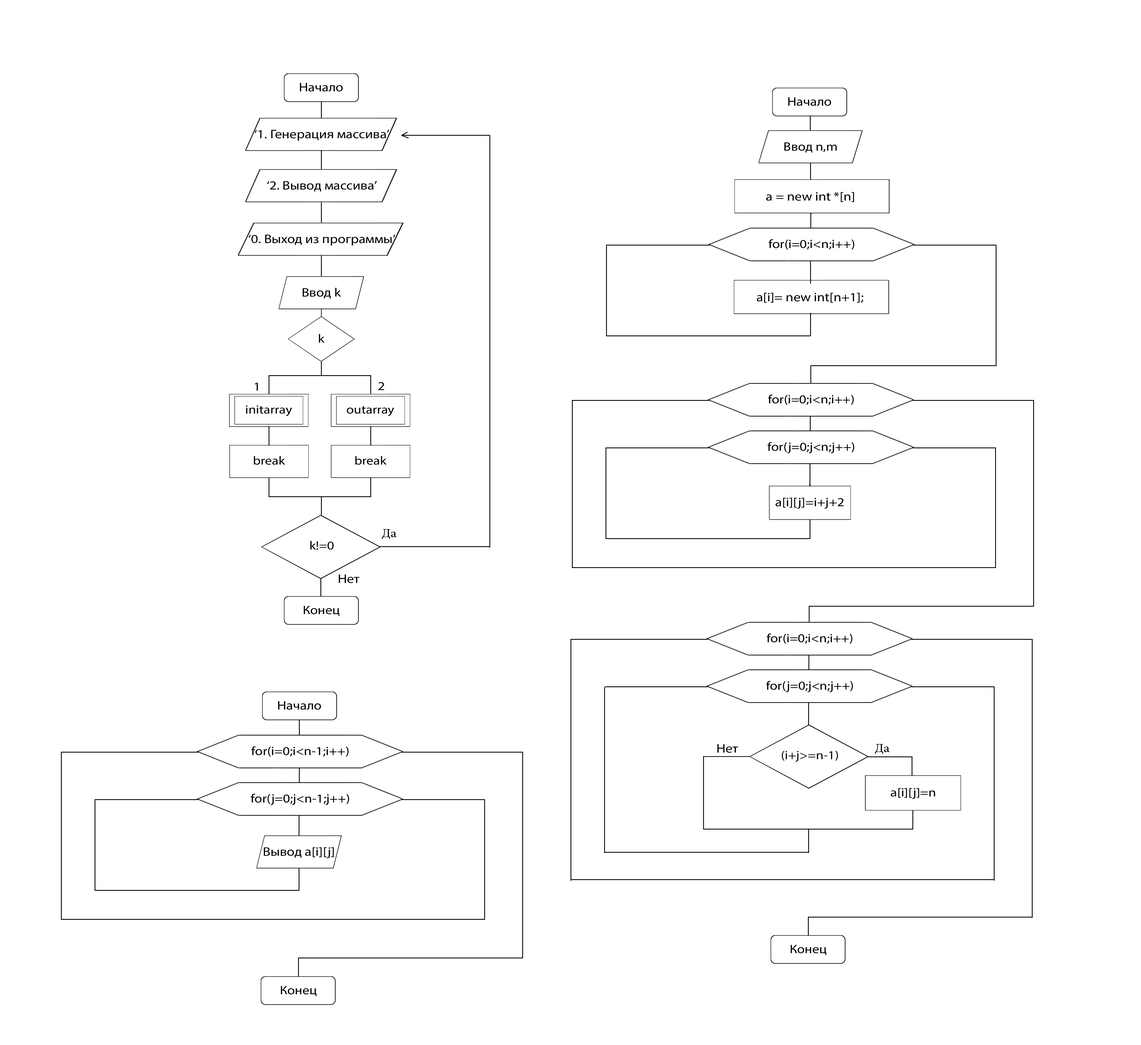
<style>
.page{position:relative;width:1141px;height:1045px;background:#ffffff}
.page>*{position:absolute;margin:0}
.t1{font:12.4px "MyriadPro-Regular";color:#000000;scale:1.14 1}
.t2{font:12.1px "MyriadPro-Regular";color:#000000;scale:1.14 1}
.t3{font:12px "MyriadPro-Regular";color:#000000;scale:1.14 1}
.t4{font:12.4px "MyriadPro-Regular";color:#000000;scale:1.13 1}
</style>
<div class="page">
<p class="t1" style="left:300px;top:83px;width:43px;height:9px">Начало</p>
<p class="t1" style="left:788px;top:97px;width:43px;height:9px">Начало</p>
<p class="t1" style="left:255px;top:130px;width:134px;height:11px">‘1. Генерация массива’</p>
<p class="t2" style="left:784px;top:142px;width:53px;height:11px">Ввод n,m</p>
<p class="t1" style="left:267px;top:181px;width:110px;height:10px">‘2. Вывод массива’</p>
<p class="t1" style="left:766px;top:192px;width:88px;height:10px">a = new int *[n]</p>
<p class="t1" style="left:249px;top:234px;width:147px;height:11px">‘0. Выход из программы’</p>
<p class="t2" style="left:769px;top:239px;width:85px;height:11px">for(i=0;i&lt;n;i++)</p>
<p class="t1" style="left:303px;top:288px;width:38px;height:10px">Ввод k</p>
<p class="t1" style="left:757px;top:293px;width:107px;height:10px">a[i]= new int[n+1];</p>
<p class="t2" style="left:319px;top:334px;width:6px;height:9px">k</p>
<p class="t2" style="left:255px;top:383px;width:3px;height:8px">1</p>
<p class="t2" style="left:378px;top:382px;width:6px;height:8px">2</p>
<p class="t2" style="left:768px;top:394px;width:86px;height:11px">for(i=0;i&lt;n;i++)</p>
<p class="t3" style="left:246px;top:405px;width:46px;height:11px">initarray</p>
<p class="t3" style="left:347px;top:406px;width:47px;height:10px">outarray</p>
<p class="t2" style="left:768px;top:442px;width:86px;height:11px">for(j=0;j&lt;n;j++)</p>
<p class="t3" style="left:254px;top:456px;width:31px;height:9px">break</p>
<p class="t3" style="left:355px;top:456px;width:32px;height:9px">break</p>
<p class="t1" style="left:776px;top:498px;width:68px;height:11px">a[i][j]=i+j+2</p>
<p class="t2" style="left:310px;top:541px;width:24px;height:9px">k!=0</p>
<p class="t4" style="left:339px;top:574px;width:21px;height:9px">Нет</p>
<p class="t2" style="left:304px;top:606px;width:36px;height:10px">Конец</p>
<p class="t2" style="left:767px;top:633px;width:86px;height:11px">for(i=0;i&lt;n;i++)</p>
<p class="t2" style="left:766px;top:681px;width:87px;height:11px">for(j=0;j&lt;n;j++)</p>
<p class="t1" style="left:278px;top:701px;width:43px;height:9px">Начало</p>
<p class="t2" style="left:251px;top:746px;width:98px;height:11px">for(i=0;i&lt;n-1;i++)</p>
<p class="t4" style="left:717px;top:744px;width:21px;height:9px">Нет</p>
<p class="t2" style="left:782px;top:750px;width:56px;height:12px">(i+j&gt;=n-1)</p>
<p class="t2" style="left:251px;top:794px;width:98px;height:11px">for(j=0;j&lt;n-1;j++)</p>
<p class="t2" style="left:891px;top:788px;width:45px;height:11px">a[i][j]=n</p>
<p class="t1" style="left:264px;top:847px;width:70px;height:11px">Вывод a[i][j]</p>
<p class="t2" style="left:791px;top:945px;width:36px;height:10px">Конец</p>
<p class="t2" style="left:281px;top:986px;width:36px;height:10px">Конец</p>
</div>
